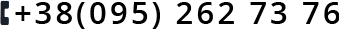
<style>
.page{position:relative;width:339px;height:30px;background:#ffffff}
.page>*{position:absolute;margin:0}
.t1{font:31px "OpenSans-Semibold";letter-spacing:0.1em;color:#000000}
</style>
<div class="page">
<p class="t1" style="left:15px;top:2px;width:325px;height:27px">+38(095) 262 73 76</p>
</div>
